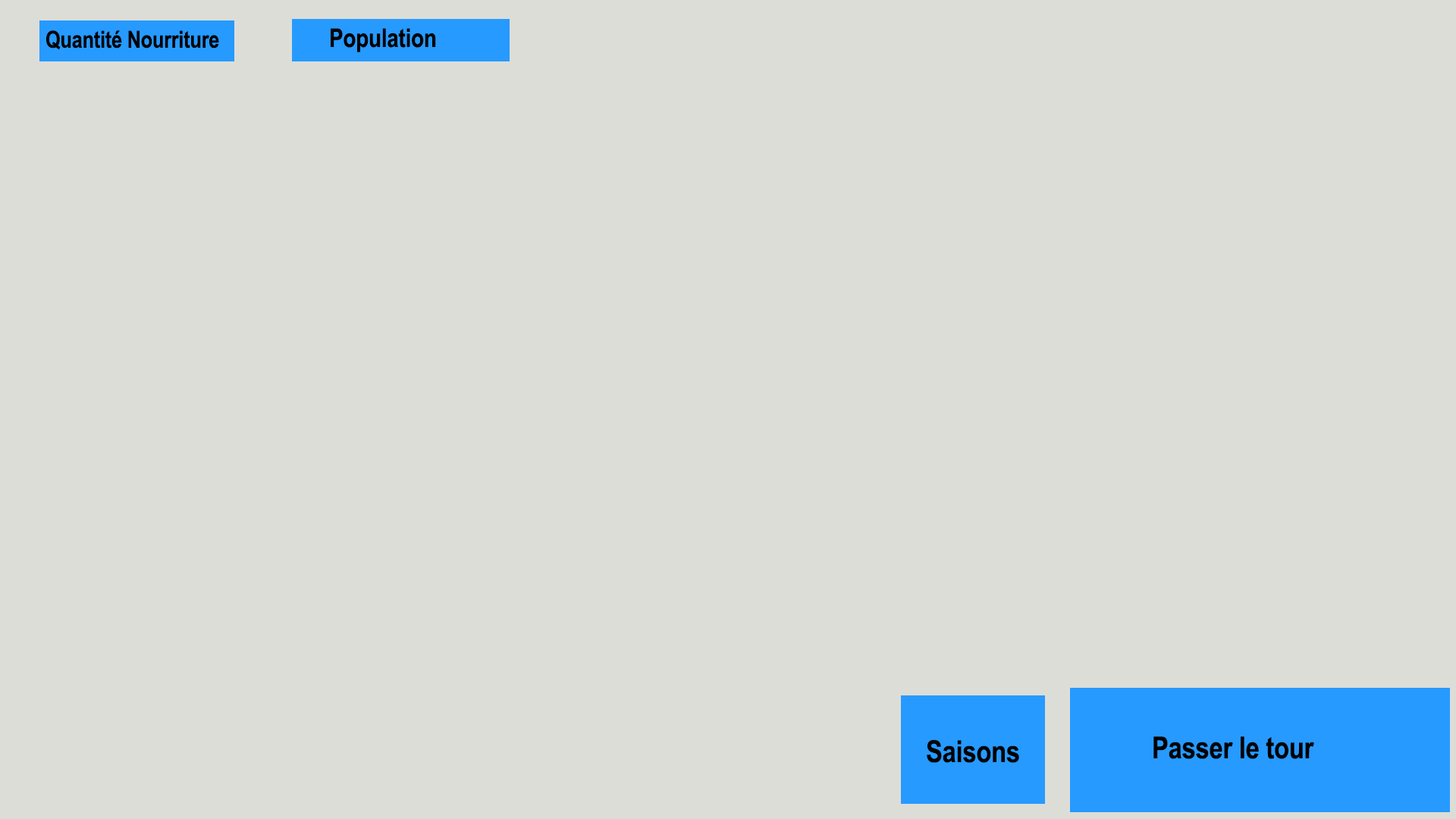
<style>
.page{position:relative;width:1456px;height:819px;background:#ddddd7}
.page>*{position:absolute;margin:0}
.t1{font:25.8px "ArialNarrow-Bold";letter-spacing:-0.007em;color:#000000}
.t2{font:23.4px "ArialNarrow-Bold";letter-spacing:-0.007em;color:#000000}
.t3{font:30.3px "ArialNarrow-Bold";letter-spacing:-0.007em;color:#000000}
</style>
<div class="page">
<p class="t1" style="left:331px;top:28px;width:105px;height:24px">Population</p>
<p class="t2" style="left:46px;top:30px;width:173px;height:20px">Quantité Nourriture</p>
<p class="t3" style="left:1153px;top:736px;width:161px;height:23px">Passer le tour</p>
<p class="t3" style="left:927px;top:739px;width:92px;height:24px">Saisons</p>
</div>
